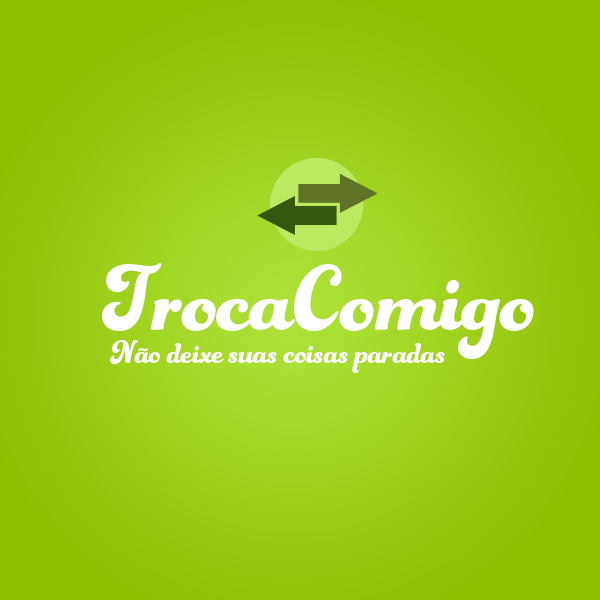
<style>
.page{position:relative;width:600px;height:600px}
.page>*{position:absolute;margin:0}
.t1{font:100px "UVFFunkydori";color:#ffffff}
.t2{font:34px "UVFFunkydori";color:#ffffff}
</style>
<div class="page">
<p class="t1" style="left:102px;top:263px;width:432px;height:96px">TrocaComigo</p>
<p class="t2" style="left:110px;top:340px;width:335px;height:33px">Não deixe suas coisas paradas</p>
</div>
